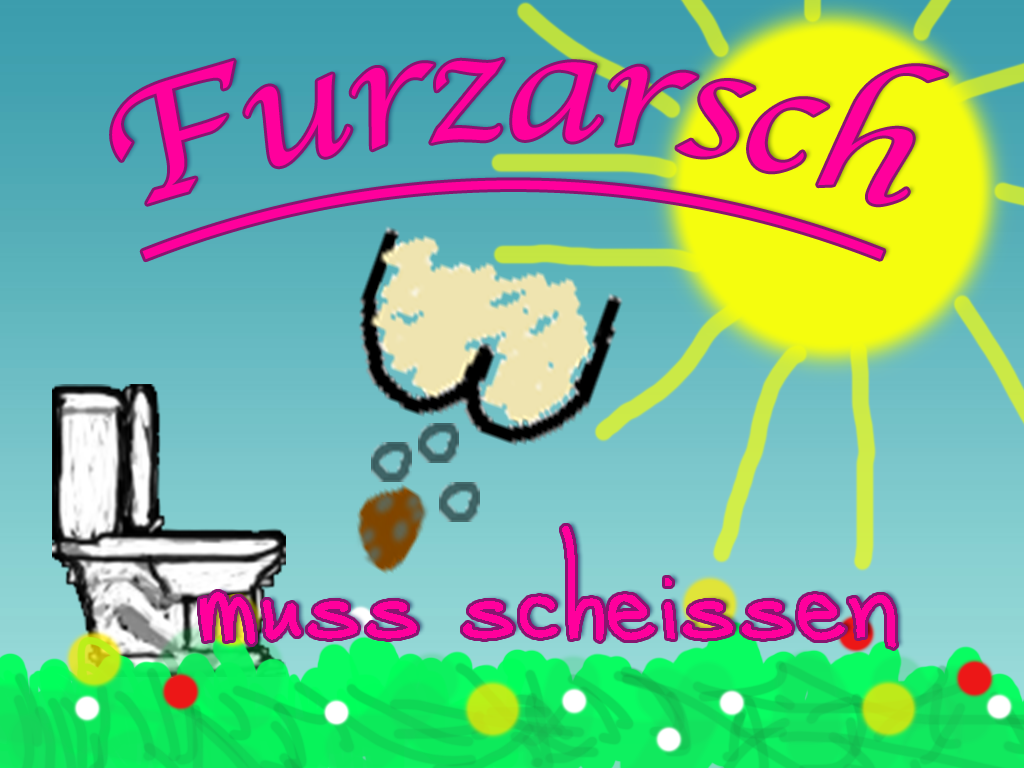
<style>
.page{position:relative;width:1024px;height:768px}
.page>*{position:absolute;margin:0}
.t1{font:166.7px "Apple-Chancery";color:#ff009c;text-decoration:underline}
.t2{font:191.7px "alphabetizedcassettetapes";color:#ff009c}
</style>
<div class="page">
<p class="t1" style="left:112px;top:59px;width:835px;height:201px">Furzarsch</p>
<p class="t2" style="left:200px;top:526px;width:696px;height:122px">muss scheissen</p>
</div>
